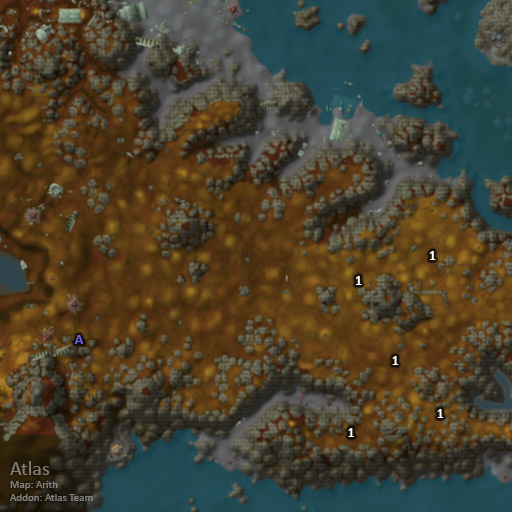
<style>
.page{position:relative;width:512px;height:512px}
.page>*{position:absolute;margin:0}
.t1{font:14px "Calibri-Bold";color:#ffffff}
.t2{font:14px "Calibri-Bold";color:#6666ff}
.t3{font:11px "Calibri";color:#827e78}
.t4{font:20px "Calibri";color:#827e78}
</style>
<div class="page">
<p class="t1" style="left:429px;top:251px;width:7px;height:9px">1</p>
<p class="t1" style="left:355px;top:276px;width:7px;height:9px">1</p>
<p class="t2" style="left:74px;top:335px;width:9px;height:9px">A</p>
<p class="t1" style="left:392px;top:356px;width:7px;height:9px">1</p>
<p class="t1" style="left:437px;top:409px;width:7px;height:9px">1</p>
<p class="t1" style="left:348px;top:428px;width:6px;height:9px">1</p>
<p class="t3" style="left:10px;top:461px;width:83px;height:40px"><span class="t4">Atlas<br></span>Map: Arith<br>Addon: Atlas Team</p>
</div>
